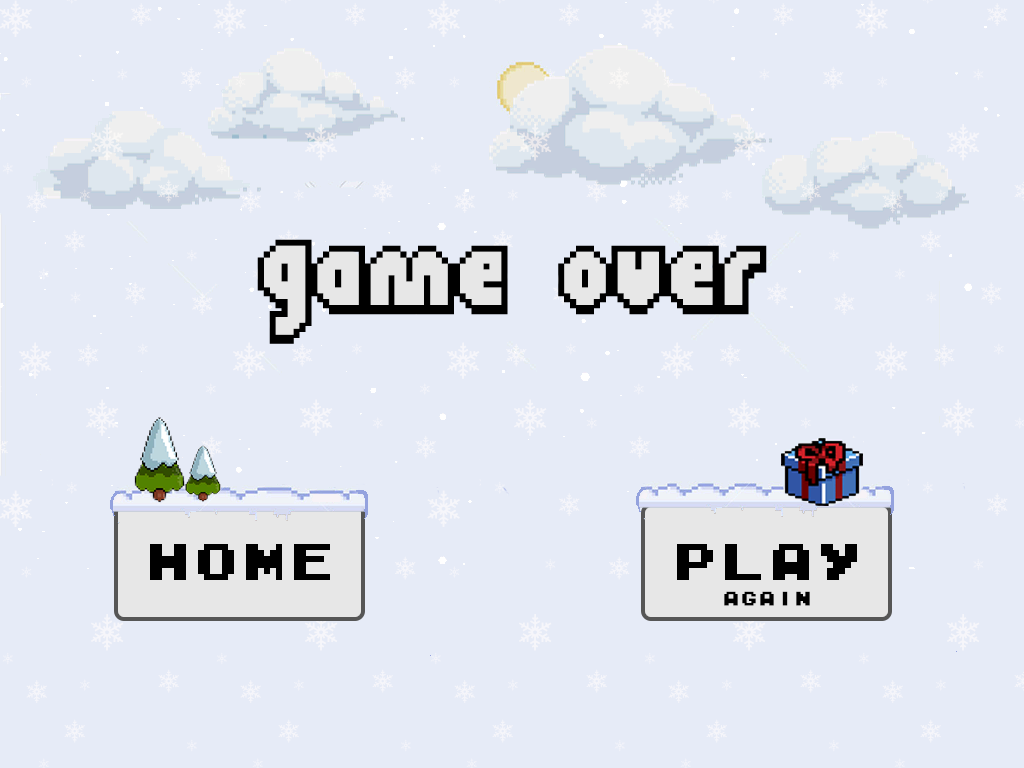
<style>
.page{position:relative;width:1024px;height:768px;background:#e6ebf7}
.page>*{position:absolute;margin:0}
.t1{font:48px "M04_FATAL-FURY-BLACK";color:#000000}
.t2{font:18px "M04_FATAL-FURY-BLACK";color:#000000}
</style>
<div class="page">
<p class="t1" style="left:150px;top:544px;width:180px;height:36px">Home</p>
<p class="t2" style="left:677px;top:544px;width:180px;height:62px;text-align:center"><span class="t1">play<br></span>again</p>
</div>
